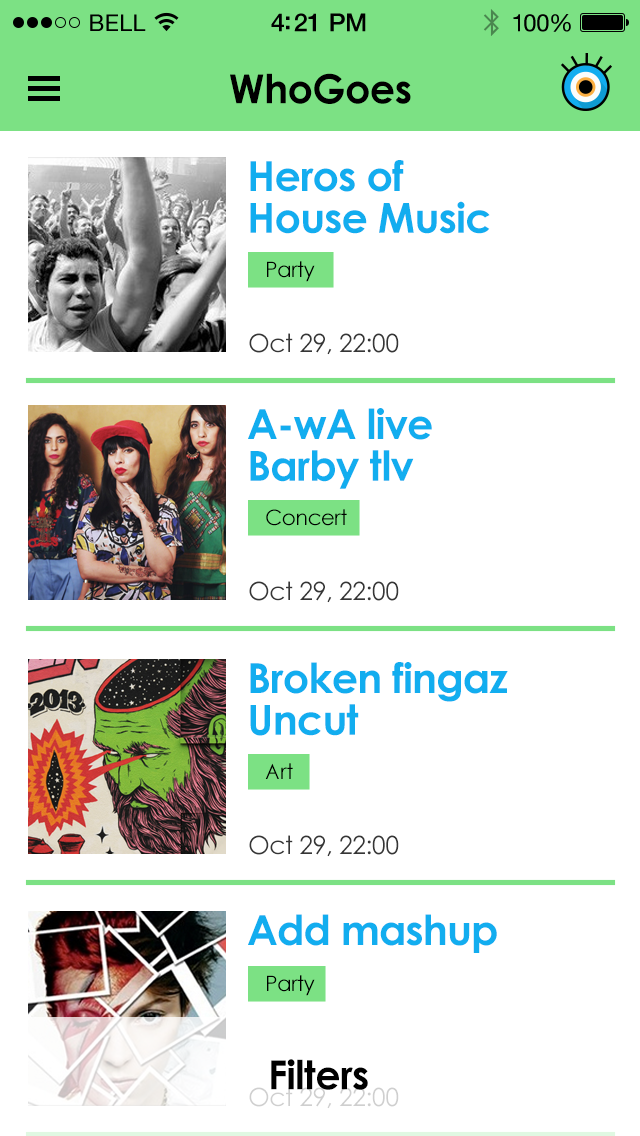
<style>
.page{position:relative;width:640px;height:1136px;background:#ffffff}
.page>*{position:absolute;margin:0}
.t1{font:23px "HelveticaNeue";letter-spacing:0.02em;color:#000000}
.t2{font:25px "HelveticaNeue-Medium";letter-spacing:-0.02em;color:#000000}
.t3{font:24px "HelveticaNeue";letter-spacing:-0.02em;color:#010101}
.t4{font:40px "CenturyGothic-Bold";letter-spacing:-0.02em;color:#000000}
.t5{font:41.5px/41.7px "CenturyGothic-Bold";letter-spacing:-0.02em;color:#12adef}
.t6{font:21.1px "CenturyGothic";letter-spacing:-0.02em;color:#000000}
.t7{font:25px "CenturyGothic";letter-spacing:-0.02em;color:#363636}
.t8{font:41.5px "CenturyGothic-Bold";letter-spacing:-0.02em;color:#12adef}
.t9{font:25px "CenturyGothic";letter-spacing:-0.02em;color:#cfcfcf}
</style>
<div class="page">
<p class="t1" style="left:90px;top:14px;width:56px;height:17px">BELL</p>
<p class="t2" style="left:271px;top:13px;width:95px;height:19px">4:21 PM</p>
<p class="t3" style="left:513px;top:14px;width:58px;height:18px">100%</p>
<p class="t4" style="left:230px;top:73px;width:181px;height:31px">WhoGoes</p>
<p class="t5" style="left:250px;top:160px;width:240px;height:74px">Heros of <br>House Music</p>
<p class="t6" style="left:267px;top:261px;width:48px;height:21px">Party</p>
<p class="t7" style="left:249px;top:333px;width:150px;height:22px">Oct 29, 22:00</p>
<p class="t5" style="left:248px;top:408px;width:184px;height:81px">A-wA live <br>Barby tlv</p>
<p class="t6" style="left:266px;top:509px;width:81px;height:17px">Concert</p>
<p class="t7" style="left:249px;top:581px;width:150px;height:22px">Oct 29, 22:00</p>
<p class="t5" style="left:250px;top:662px;width:258px;height:74px">Broken fingaz<br>Uncut</p>
<p class="t6" style="left:265px;top:763px;width:28px;height:16px">Art</p>
<p class="t7" style="left:249px;top:835px;width:150px;height:22px">Oct 29, 22:00</p>
<p class="t8" style="left:248px;top:914px;width:249px;height:39px">Add mashup</p>
<p class="t6" style="left:267px;top:975px;width:48px;height:21px">Party</p>
<p class="t4" style="left:271px;top:1059px;width:97px;height:31px">Filters</p>
<p class="t9" style="left:249px;top:1087px;width:150px;height:22px">Oct 29, 22:00</p>
</div>
